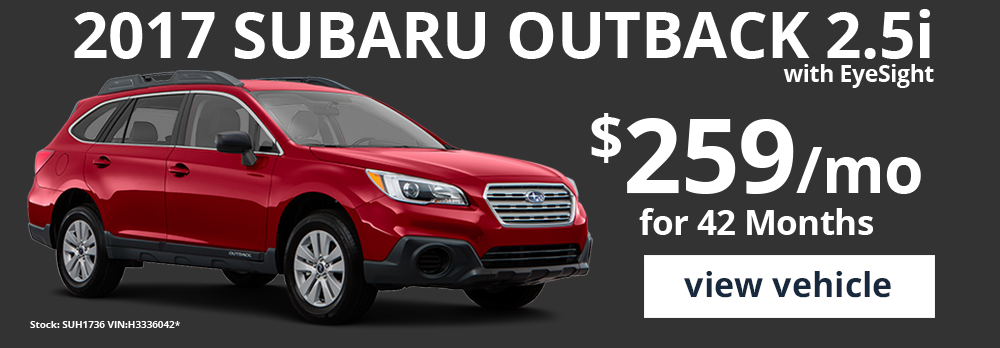
<style>
.page{position:relative;width:1000px;height:348px;background:#333333}
.page>*{position:absolute;margin:0}
.t1{font:110px "OpenSans-Bold";letter-spacing:-0.01em;color:#ffffff}
.t2{font:39px/0px "OpenSans-Bold";letter-spacing:-0.01em;color:#ffffff}
.t3{font:34.6px/42.4px "OpenSans-Bold";letter-spacing:-0.01em;color:#ffffff}
.t4{font:102.8px/42.4px "OpenSans-Bold";letter-spacing:-0.01em;color:#ffffff}
.t5{font:63.8px/42.4px "OpenSans-Bold";letter-spacing:-0.01em;color:#ffffff}
.t6{font:34.2px "OpenSans-Bold";color:#18293d}
.t7{font:10px "OpenSans-Bold";letter-spacing:-0.01em;color:#ffffff}
</style>
<div class="page">
<p class="t1" style="left:74px;top:9px;width:860px;height:79px;text-align:right">2017 SUBARU OUTBACK 2.5i<br><span class="t2">with EyeSight</span></p>
<p class="t3" style="left:591px;top:113px;width:330px;height:122px;text-align:center"><span class="t4">$259</span><span class="t5">/mo<br></span>for 42 Months</p>
<p class="t6" style="left:684px;top:271px;width:207px;height:27px">view vehicle</p>
<p class="t7" style="left:30px;top:321px;width:150px;height:7px">Stock: SUH1736 VIN:H3336042*</p>
</div>
